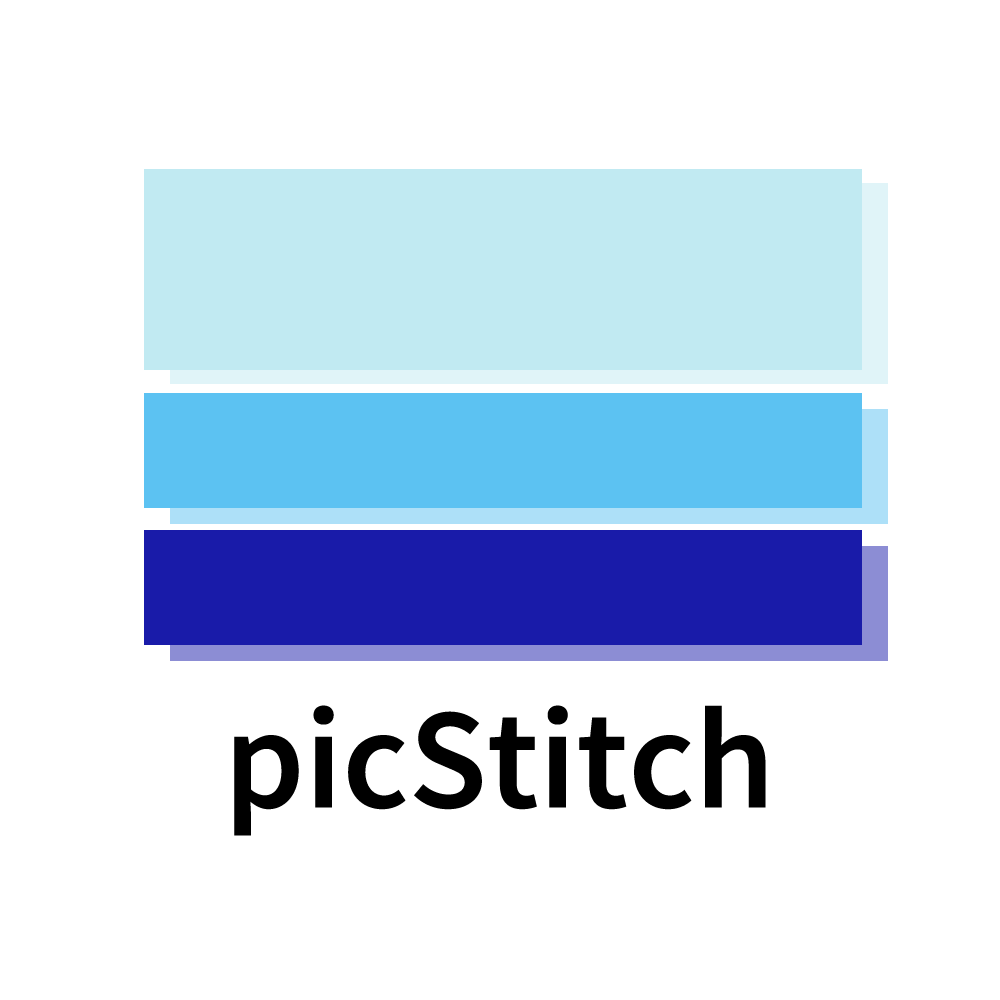
<style>
.page{position:relative;width:1000px;height:1000px;background:#ffffff}
.page>*{position:absolute;margin:0}
.t1{font:143.6px "SourceSansRoman-Semibold";color:#000000}
</style>
<div class="page">
<p class="t1" style="left:234px;top:705px;width:532px;height:131px">picStitch</p>
</div>
